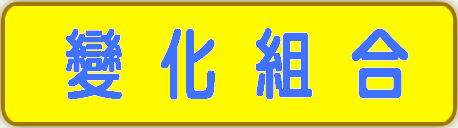
<style>
.page{position:relative;width:458px;height:128px;background:#fffa00}
.page>*{position:absolute;margin:0}
.t1{font:77.3px "DFYuan-W8-WINP-BF";letter-spacing:0.1em;color:#3f73ff;font-weight:bold;scale:0.78 1}
</style>
<div class="page">
<p class="t1" style="left:65px;top:28px;width:344px;height:72px">變 化 組 合</p>
</div>
